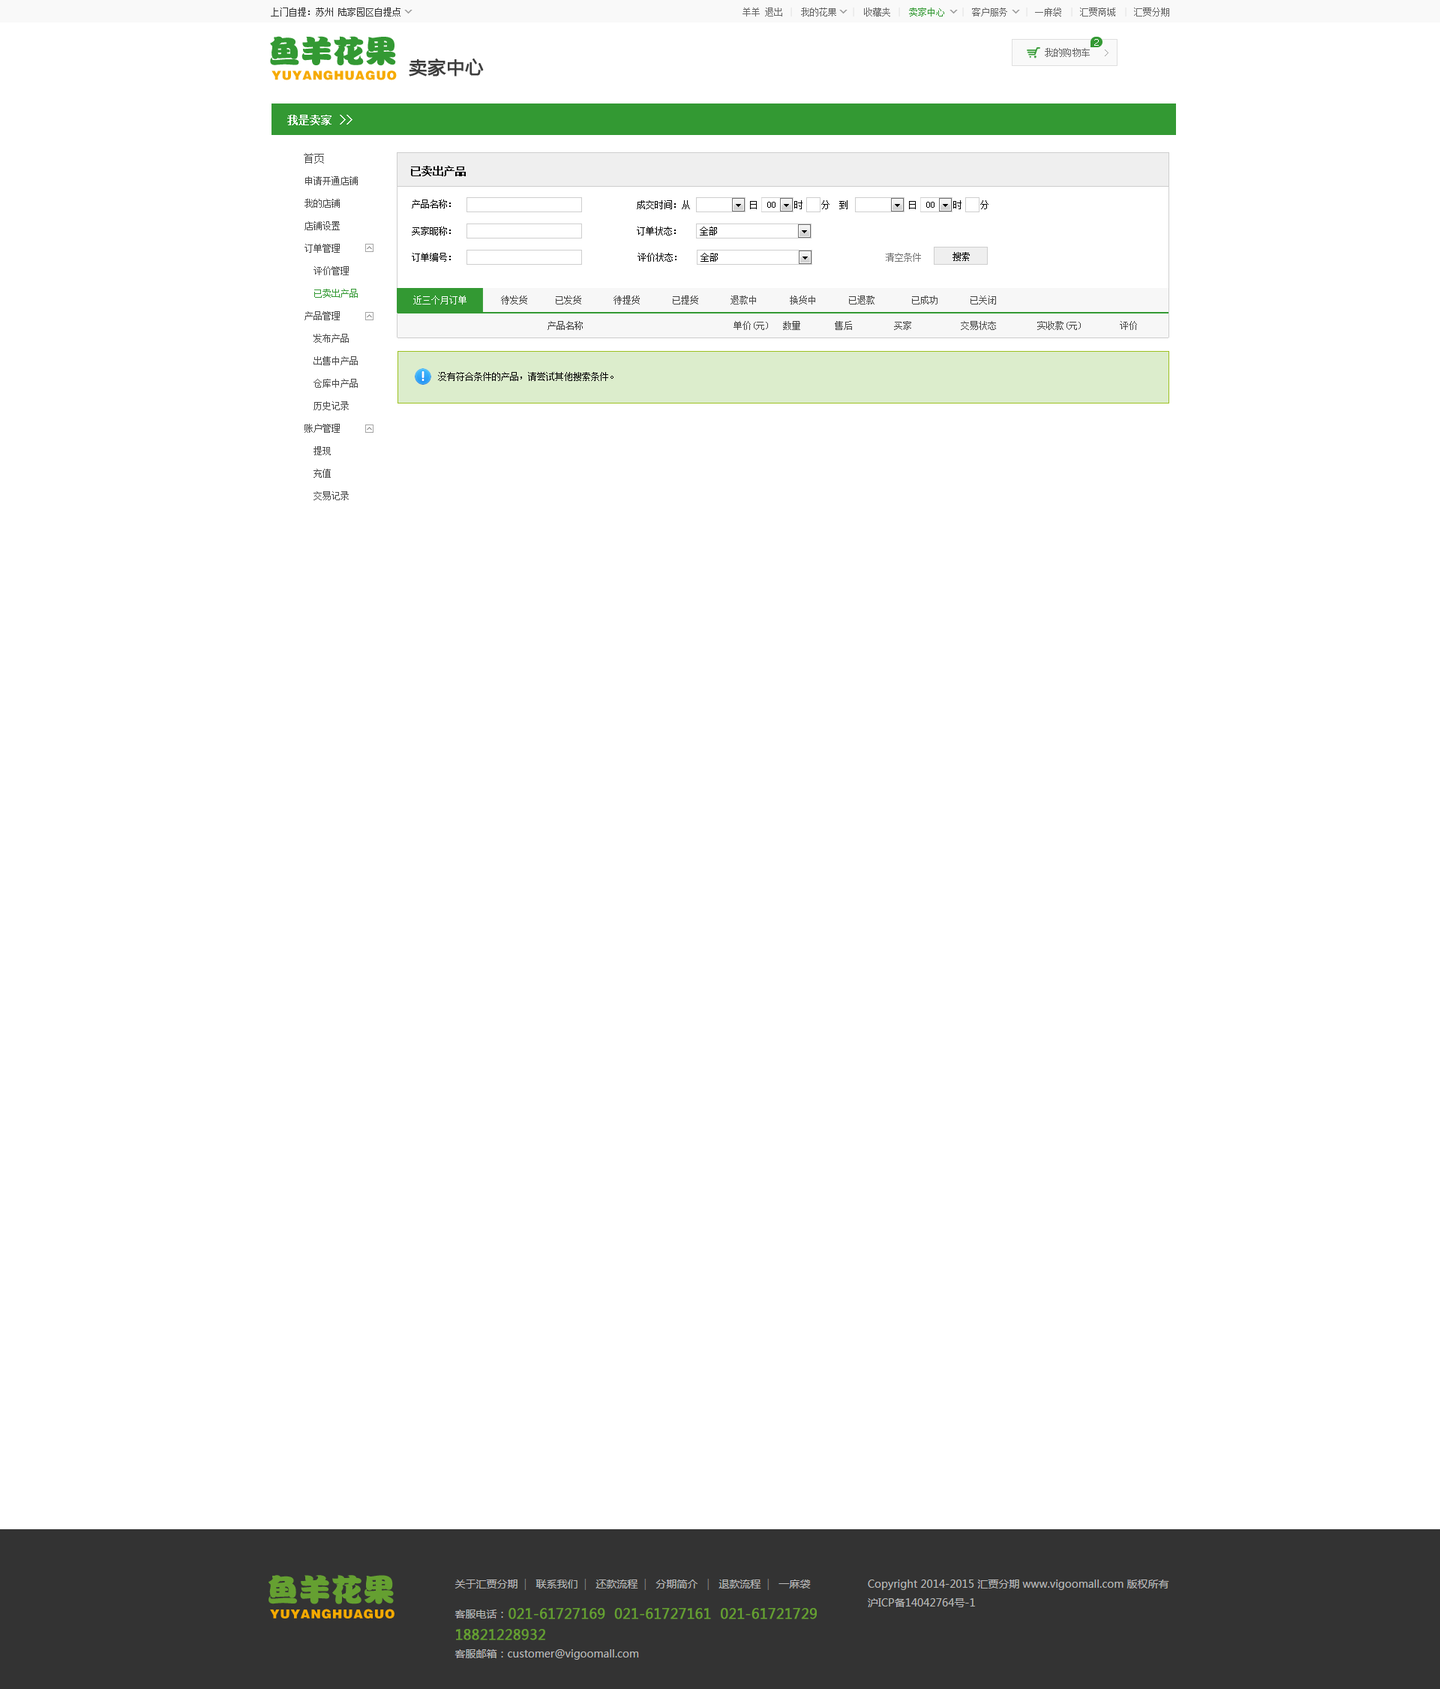
<style>
.page{position:relative;width:1440px;height:1689px;background:#ffffff}
.page>*{position:absolute;margin:0}
.t1{font:10.5px "SimSun";color:#4b4b4b}
.t2{font:10.5px "SimSun";color:#000000;font-weight:bold}
.t3{font:9px/22.5px "SimSun";color:#4b4b4b}
.t4{font:9px/22.5px "SimSun";color:#339933}
.t5{font:9px/26.3px "SimSun";color:#000000}
.t6{font:9px/13.5px "SimSun";color:#000000}
.t7{font:9px "SimSun";color:#000000}
.t8{font:9px "SimSun";color:#737373}
.t9{font:9px "SimSun";color:#ffffff}
.t10{font:9px "SimSun";color:#454544}
.t11{font:9px "SimSun";color:#4b4b4b}
.t12{font:9px "SimSun";color:#3e3e3e}
.t13{font:9px "SimSun";color:#050505}
</style>
<div class="page">
<p class="t1" style="left:304px;top:153px;width:20px;height:11px">首页</p>
<p class="t2" style="left:411px;top:166px;width:55px;height:10px">已卖出产品</p>
<p class="t3" style="left:304px;top:176px;width:54px;height:324px">申请开通店铺<br>我的店铺<br>店铺设置<br>订单管理<br>  评价管理<br>  <span class="t4">已卖出产品<br></span>产品管理<br>  发布产品<br>  出售中产品<br>  仓库中产品<br>  历史记录<br>账户管理<br>  提现<br>  充值<br>  交易记录</p>
<p class="t5" style="left:412px;top:200px;width:39px;height:62px"><span class="t6">产品名称：<br><br></span>买家昵称：<br>订单编号：</p>
<p class="t7" style="left:637px;top:200px;width:211px;height:9px">成交时间：从             日  00    时    分  到</p>
<p class="t7" style="left:909px;top:200px;width:79px;height:9px">日  00    时    分</p>
<p class="t7" style="left:637px;top:226px;width:80px;height:10px">订单状态：    全部</p>
<p class="t7" style="left:638px;top:253px;width:80px;height:9px">评价状态：    全部</p>
<p class="t8" style="left:886px;top:253px;width:35px;height:9px">清空条件</p>
<p class="t7" style="left:952px;top:252px;width:18px;height:9px">搜索</p>
<p class="t9" style="left:413px;top:296px;width:53px;height:8px">近三个月订单</p>
<p class="t10" style="left:501px;top:296px;width:495px;height:8px">待发货      已发货       待提货       已提货     <span class="t11">  退款中       换货中</span>       已退款        已成功       已关闭</p>
<p class="t12" style="left:548px;top:321px;width:35px;height:9px">产品名称</p>
<p class="t10" style="left:734px;top:321px;width:34px;height:9px">单价(元)</p>
<p class="t10" style="left:783px;top:321px;width:17px;height:9px">数量</p>
<p class="t10" style="left:835px;top:321px;width:17px;height:9px">售后</p>
<p class="t10" style="left:894px;top:321px;width:17px;height:9px">买家</p>
<p class="t10" style="left:961px;top:321px;width:35px;height:9px">交易状态</p>
<p class="t10" style="left:1037px;top:321px;width:44px;height:9px">实收款(元)</p>
<p class="t10" style="left:1120px;top:321px;width:17px;height:9px">评价</p>
<p class="t13" style="left:438px;top:372px;width:176px;height:9px">没有符合条件的产品，请尝试其他搜索条件。</p>
</div>
